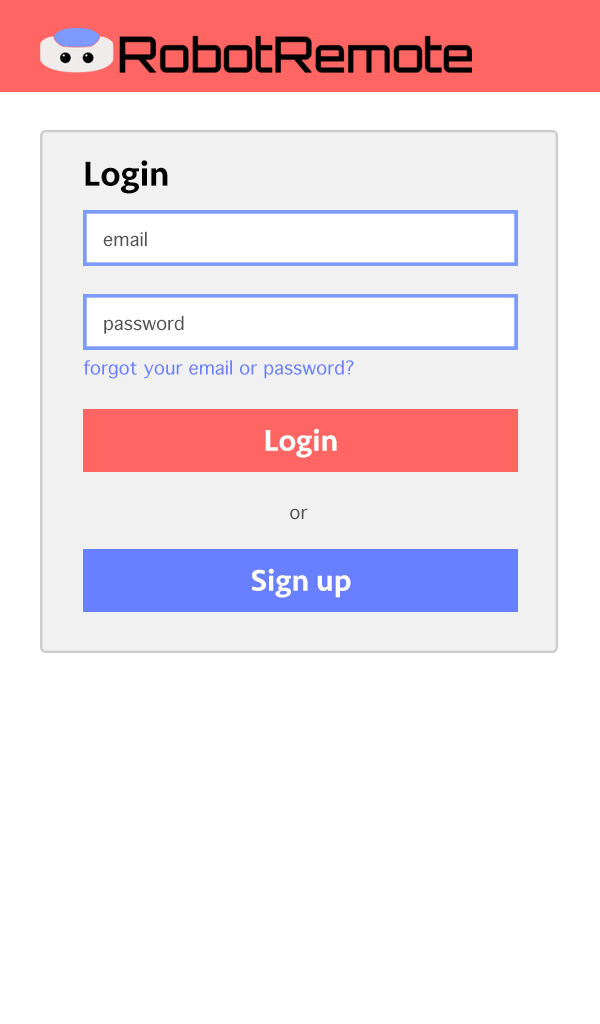
<style>
.page{position:relative;width:600px;height:1024px;background:#ffffff}
.page>*{position:absolute;margin:0}
.t1{font:36px "Seravek-Medium";color:#000000}
.t2{font:18px "Geneva";color:#545454}
.t3{font:18px "Geneva";color:#687fff}
.t4{font:31.1px "Seravek-Medium";color:#ffffff}
</style>
<div class="page">
<p class="t1" style="left:85px;top:160px;width:83px;height:34px">Login</p>
<p class="t2" style="left:103px;top:231px;width:44px;height:16px">email</p>
<p class="t2" style="left:104px;top:315px;width:80px;height:19px">password</p>
<p class="t3" style="left:83px;top:360px;width:271px;height:19px">forgot your email or password?</p>
<p class="t4" style="left:265px;top:428px;width:72px;height:30px">Login</p>
<p class="t2" style="left:290px;top:508px;width:18px;height:12px">or</p>
<p class="t4" style="left:251px;top:568px;width:100px;height:30px">Sign up</p>
</div>
